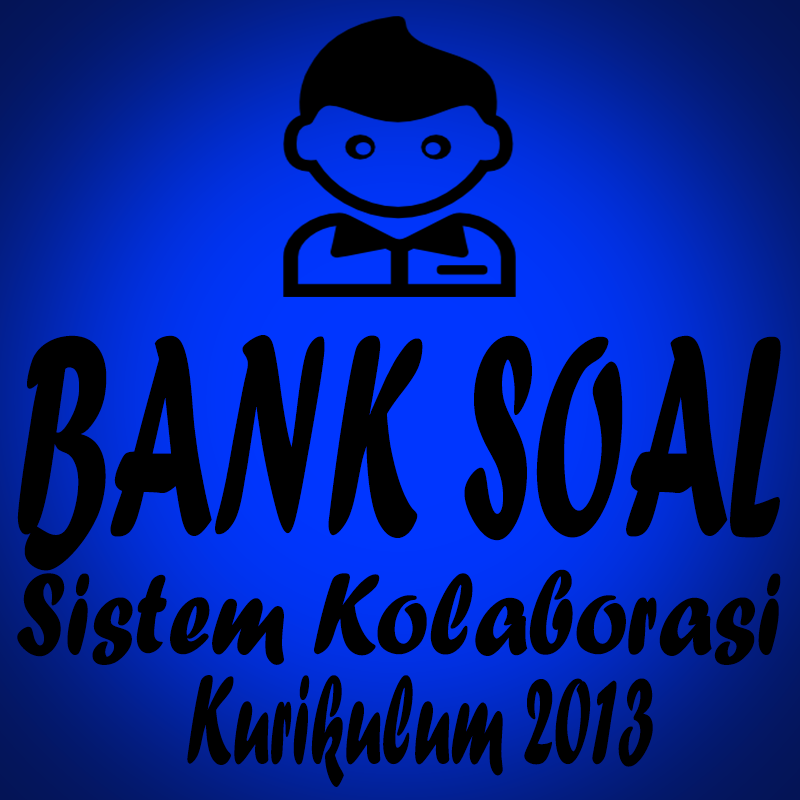
<style>
.page{position:relative;width:800px;height:800px;background:#000000}
.page>*{position:absolute;margin:0}
.t1{font:296.4px "ForteMT";color:#000000;scale:0.48 1}
.t2{font:120.1px "ForteMT";color:#000000;scale:0.82 1}
.t3{font:131.5px "ForteMT";color:#000000;scale:0.53 1}
</style>
<div class="page">
<p class="t1" style="left:17px;top:335px;width:764px;height:236px">BANK SOAL</p>
<p class="t2" style="left:17px;top:569px;width:764px;height:96px">Sistem Kolaborasi</p>
<p class="t3" style="left:187px;top:675px;width:466px;height:112px">Kurikulum 2013</p>
</div>
